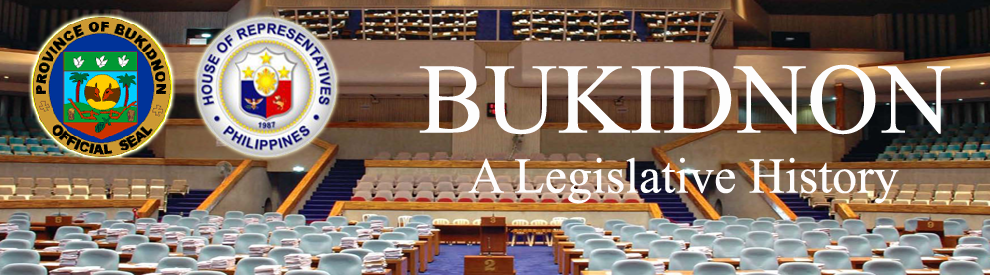
<style>
.page{position:relative;width:990px;height:275px}
.page>*{position:absolute;margin:0}
.t1{font:50px "TimesNewRomanPSMT";color:#fdfcfc}
.t2{font:100px "TimesNewRomanPSMT";color:#fdfdfd}
</style>
<div class="page">
<p class="t1" style="left:419px;top:64px;width:532px;height:140px;text-align:center"><span class="t2">BUKIDNON<br></span>A Legislative History</p>
</div>
